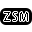
<style>
.page{position:relative;width:32px;height:32px;background:#ffffff}
.page>*{position:absolute;margin:0}
.t1{font:12px "MyriadPro-Regular";letter-spacing:0.11em;color:#000000}
</style>
<div class="page">
<p class="t1" style="left:4px;top:12px;width:24px;height:9px">ZSM</p>
</div>
